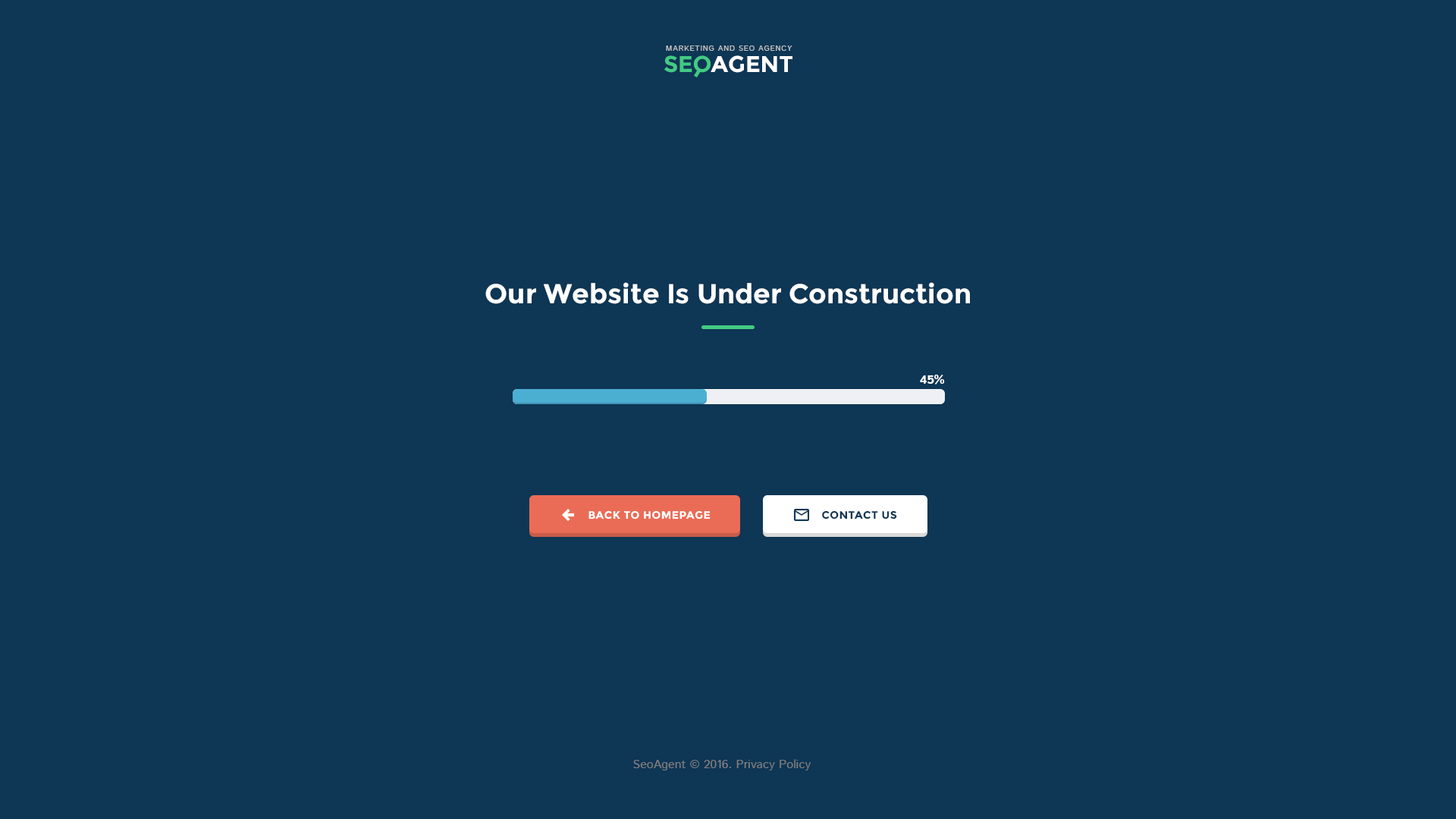
<style>
.page{position:relative;width:1456px;height:819px;background:#0e3655}
.page>*{position:absolute;margin:0}
.t1{font:7.6px "IstokWeb-Regular";letter-spacing:0.08em;color:#c1c1c1;text-transform:uppercase}
.t2{font:22.7px "Montserrat-Bold";color:#43ca83}
.t3{font:22.7px "Montserrat-Bold";color:#ffffff}
.t4{font:27.3px "Montserrat-Bold";color:#ffffff}
.t5{font:12.1px "IstokWeb-Bold";color:#ffffff}
.t6{font:10.6px "Montserrat-Bold";letter-spacing:0.04em;color:#ffffff;text-transform:uppercase}
.t7{font:10.6px "Montserrat-Bold";letter-spacing:0.04em;color:#0e3655;text-transform:uppercase}
.t8{font:12.1px "IstokWeb-Regular";color:#7f7f7f}
</style>
<div class="page">
<p class="t1" style="left:666px;top:45px;width:126px;height:6px">Marketing and SEO agency</p>
<p class="t2" style="left:664px;top:55px;width:47px;height:18px">SEO</p>
<p class="t3" style="left:711px;top:55px;width:81px;height:18px">AGENT</p>
<p class="t4" style="left:485px;top:282px;width:485px;height:22px">Our Website Is Under Construction</p>
<p class="t5" style="left:920px;top:375px;width:25px;height:9px">45%</p>
<p class="t6" style="left:588px;top:510px;width:123px;height:9px">back to homepage</p>
<p class="t7" style="left:822px;top:510px;width:75px;height:9px">contact us</p>
<p class="t8" style="left:633px;top:759px;width:178px;height:11px">SeoAgent © 2016. Privacy Policy</p>
</div>
